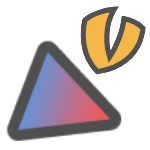
<style>
.page{position:relative;width:150px;height:150px;background:#ffffff}
.page>*{position:absolute;margin:0}
.t1{font:150px "CevicheOne-Regular"}
</style>
<div class="page">
<p class="t1" style="left:80px;top:6px;width:66px;height:69px">v</p>
</div>
